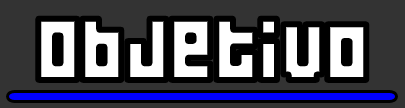
<style>
.page{position:relative;width:405px;height:108px;background:#333333}
.page>*{position:absolute;margin:0}
.t1{font:78px "04b19";color:#ffffff}
</style>
<div class="page">
<p class="t1" style="left:38px;top:18px;width:329px;height:62px">ObJetivo</p>
</div>
